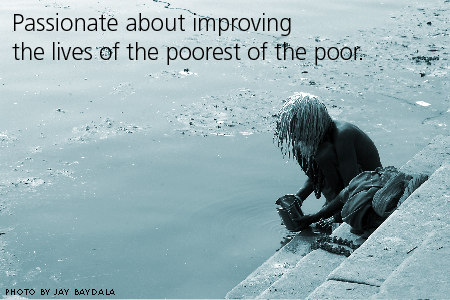
<style>
.page{position:relative;width:450px;height:300px}
.page>*{position:absolute;margin:0}
.t1{font:24px "Frutiger-Light";letter-spacing:-0.01em;color:#000000}
.t2{font:24px/14px "Frutiger-Light";color:#000000}
.t3{font:9px "Frutiger-Light";letter-spacing:0.075em;color:#000000}
</style>
<div class="page">
<p class="t1" style="left:12px;top:13px;width:350px;height:52px"><span class="t2">Passionate about </span>improving <br>the lives of the poorest of the poor.</p>
<p class="t3" style="left:6px;top:289px;width:109px;height:6px">PHOTO BY JAY BAYDALA</p>
</div>
